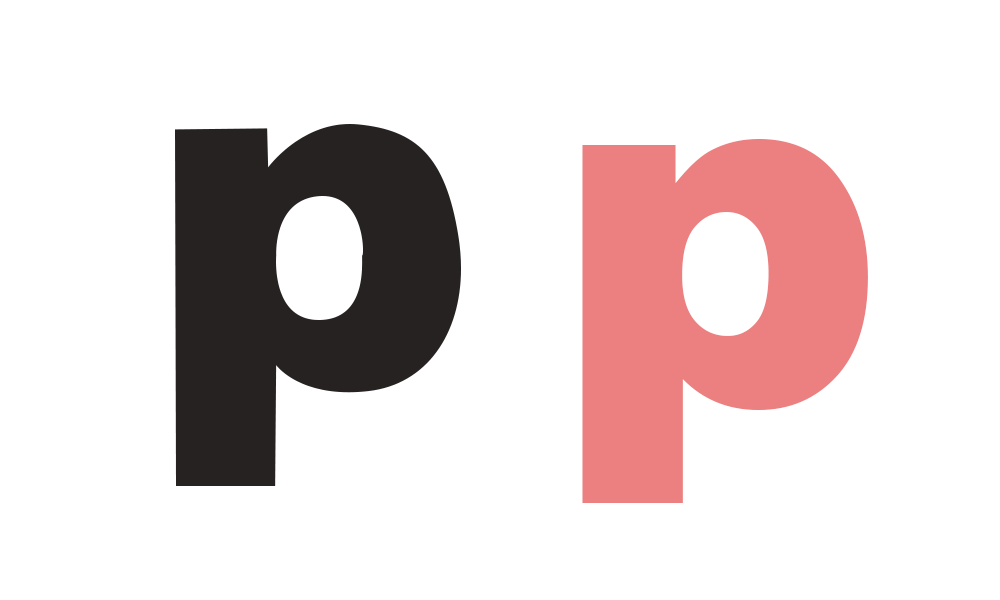
<style>
.page{position:relative;width:1000px;height:600px;background:#ffffff}
.page>*{position:absolute;margin:0}
.t1{font:500px "Arial-Black";color:#ec7f7f}
</style>
<div class="page">
<p class="t1" style="left:582px;top:139px;width:286px;height:364px">p</p>
</div>
